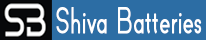
<style>
.page{position:relative;width:206px;height:40px;background:#2c6da4}
.page>*{position:absolute;margin:0}
.t1{font:34.5px "BigJohnPRO-Regular";color:#ffffff;font-weight:bold;scale:0.64 1}
</style>
<div class="page">
<p class="t1" style="left:56px;top:7px;width:146px;height:27px">Shiva Batteries</p>
</div>
